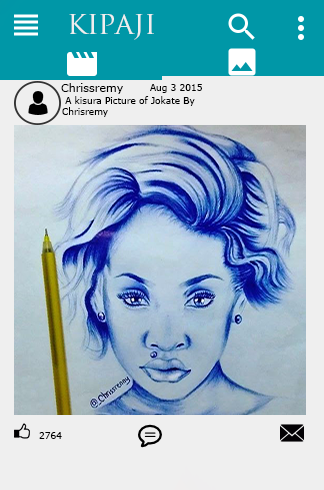
<style>
.page{position:relative;width:324px;height:490px;background:#efefef}
.page>*{position:absolute;margin:0}
.t1{font:30px "TrajanPro-Regular";color:#efefef}
.t2{font:11px "Verdana";color:#000000}
.t3{font:9px "Verdana";color:#000000}
</style>
<div class="page">
<p class="t1" style="left:69px;top:14px;width:85px;height:26px">kipaji</p>
<p class="t2" style="left:61px;top:83px;width:62px;height:11px">Chrissremy</p>
<p class="t3" style="left:150px;top:84px;width:52px;height:9px">Aug 3 2015</p>
<p class="t3" style="left:62px;top:96px;width:133px;height:21px;text-align:right">A kisura Picture of Jokate By <br>Chrisremy</p>
<p class="t3" style="left:39px;top:432px;width:23px;height:7px">2764</p>
</div>
